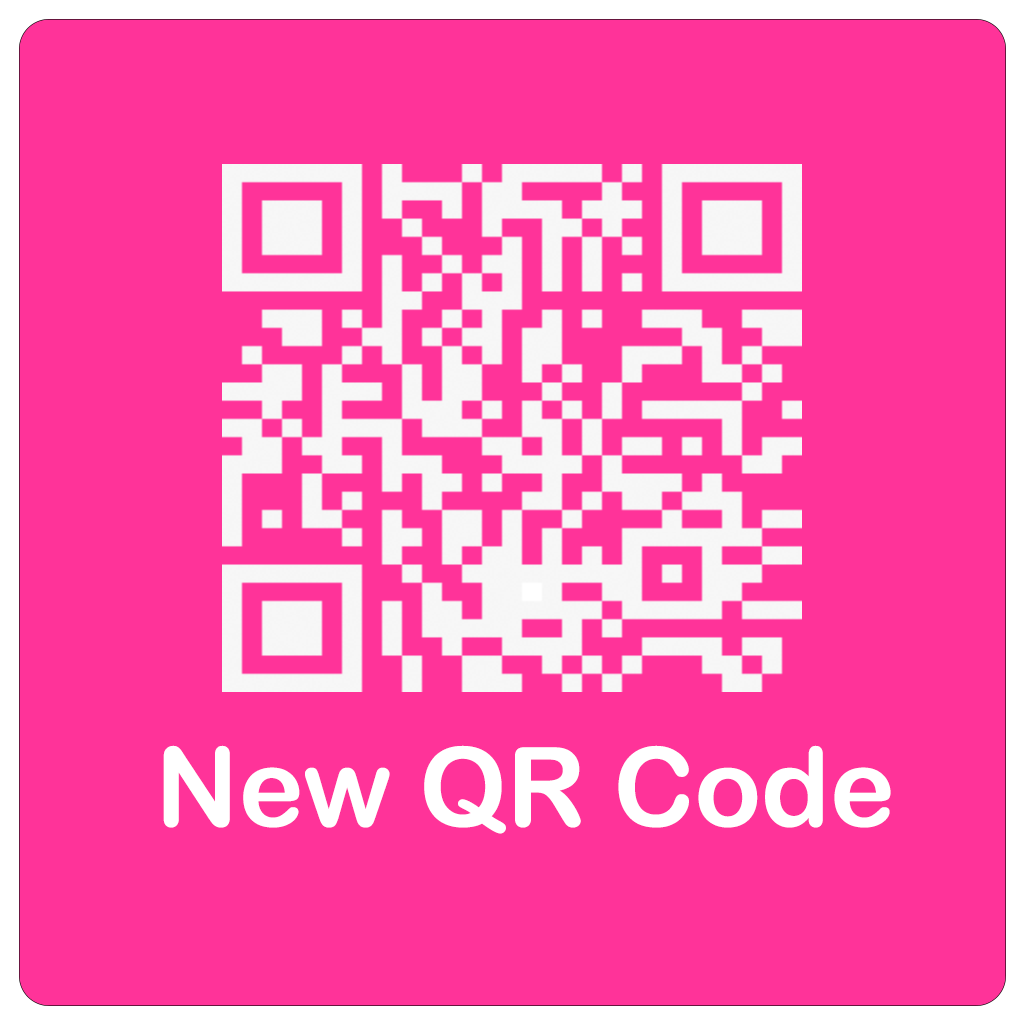
<style>
.page{position:relative;width:1024px;height:1024px;background:#ff3399}
.page>*{position:absolute;margin:0}
.t1{font:110px "ArialRoundedMTBold";color:#ffffff}
</style>
<div class="page">
<p class="t1" style="left:163px;top:745px;width:728px;height:89px">New QR Code</p>
</div>
